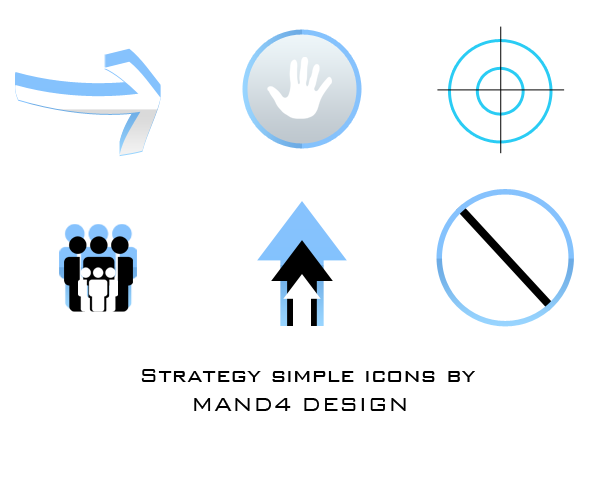
<style>
.page{position:relative;width:600px;height:500px;background:#ffffff}
.page>*{position:absolute;margin:0}
.t1{font:25px "BankGothicBT-Light";color:#000000}
</style>
<div class="page">
<p class="t1" style="left:141px;top:369px;width:334px;height:13px">Strategy simple icons by</p>
<p class="t1" style="left:194px;top:398px;width:212px;height:13px">MAND4 DESIGN</p>
</div>
